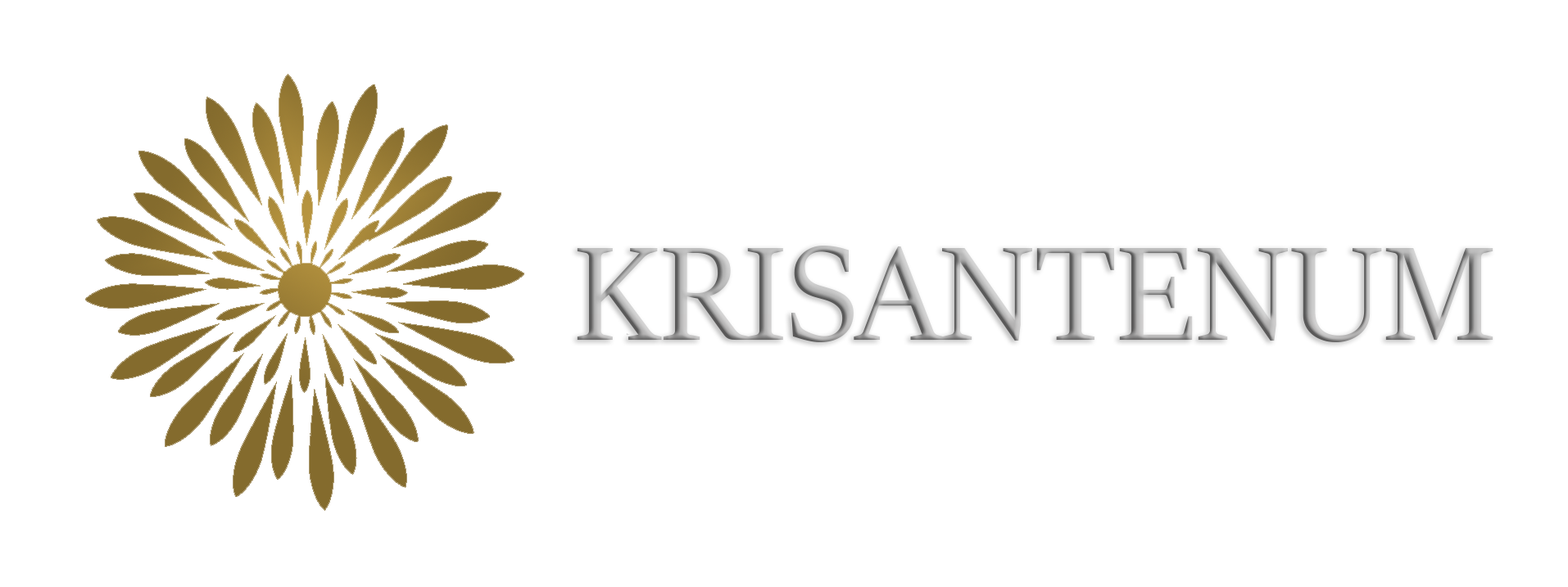
<style>
.page{position:relative;width:1568px;height:587px;background:#ffffff}
.page>*{position:absolute;margin:0}
.t1{font:150.2px "SitkaBanner"}
</style>
<div class="page">
<p class="t1" style="left:577px;top:246px;width:916px;height:96px">KRISANTENUM</p>
</div>
